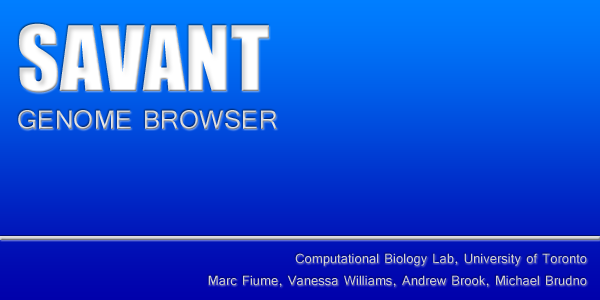
<style>
.page{position:relative;width:600px;height:300px}
.page>*{position:absolute;margin:0}
.t1{font:33.3px/33.3px "Tunga";color:#ffffff;text-transform:uppercase}
.t2{font:83.3px/50px "Impact";color:#ffffff}
.t3{font:16.7px/16.7px "Tunga";color:#d2d2d2}
</style>
<div class="page">
<p class="t1" style="left:18px;top:23px;width:259px;height:107px"><span class="t2">SAVANT <br></span>genome browser</p>
<p class="t3" style="left:208px;top:253px;width:379px;height:34px;text-align:right">Computational Biology Lab, University of Toronto<br>Marc Fiume, Vanessa Williams, Andrew Brook, Michael Brudno</p>
</div>
